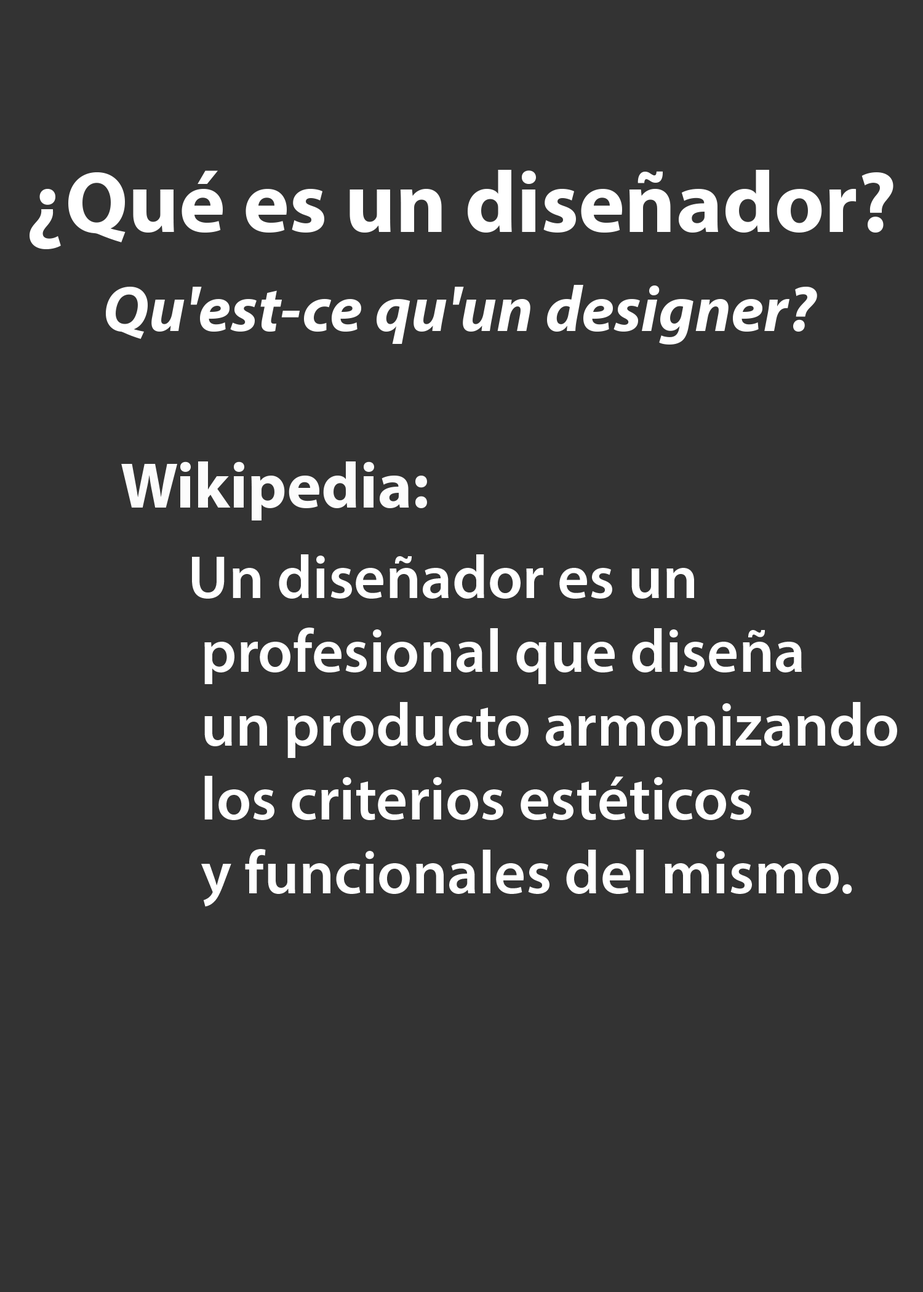
<style>
.page{position:relative;width:923px;height:1292px;background:#333333}
.page>*{position:absolute;margin:0}
.t1{font:87.4px "MyriadPro-Bold";color:#ffffff}
.t2{font:65px "MyriadPro-BoldIt";color:#ffffff}
.t3{font:65px "MyriadPro-Bold";color:#fcfcfc}
.t4{font:61.5px "MyriadPro-Semibold";color:#ffffff}
</style>
<div class="page">
<p class="t1" style="left:30px;top:170px;width:863px;height:79px">¿Qué es un diseñador?</p>
<p class="t2" style="left:106px;top:285px;width:711px;height:60px">Qu'est-ce qu'un designer?</p>
<p class="t3" style="left:121px;top:461px;width:306px;height:60px">Wikipedia:</p>
<p class="t4" style="left:192px;top:554px;width:705px;height:353px">Un diseñador es un<br> profesional que diseña<br> un producto armonizando<br> los criterios estéticos<br> y funcionales del mismo.</p>
</div>
